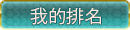
<style>
.page{position:relative;width:130px;height:30px}
.page>*{position:absolute;margin:0}
.t1{font:18px "GothicMB101Pr6N-Light";color:#ffe6dc}
</style>
<div class="page">
<p class="t1" style="left:30px;top:7px;width:71px;height:18px">我的排名</p>
</div>
